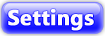
<style>
.page{position:relative;width:105px;height:36px}
.page>*{position:absolute;margin:0}
.t1{font:21.4px "SegoeUI-Bold";color:#fdfafa;font-weight:bold}
</style>
<div class="page">
<p class="t1" style="left:8px;top:9px;width:86px;height:22px">Settings</p>
</div>
